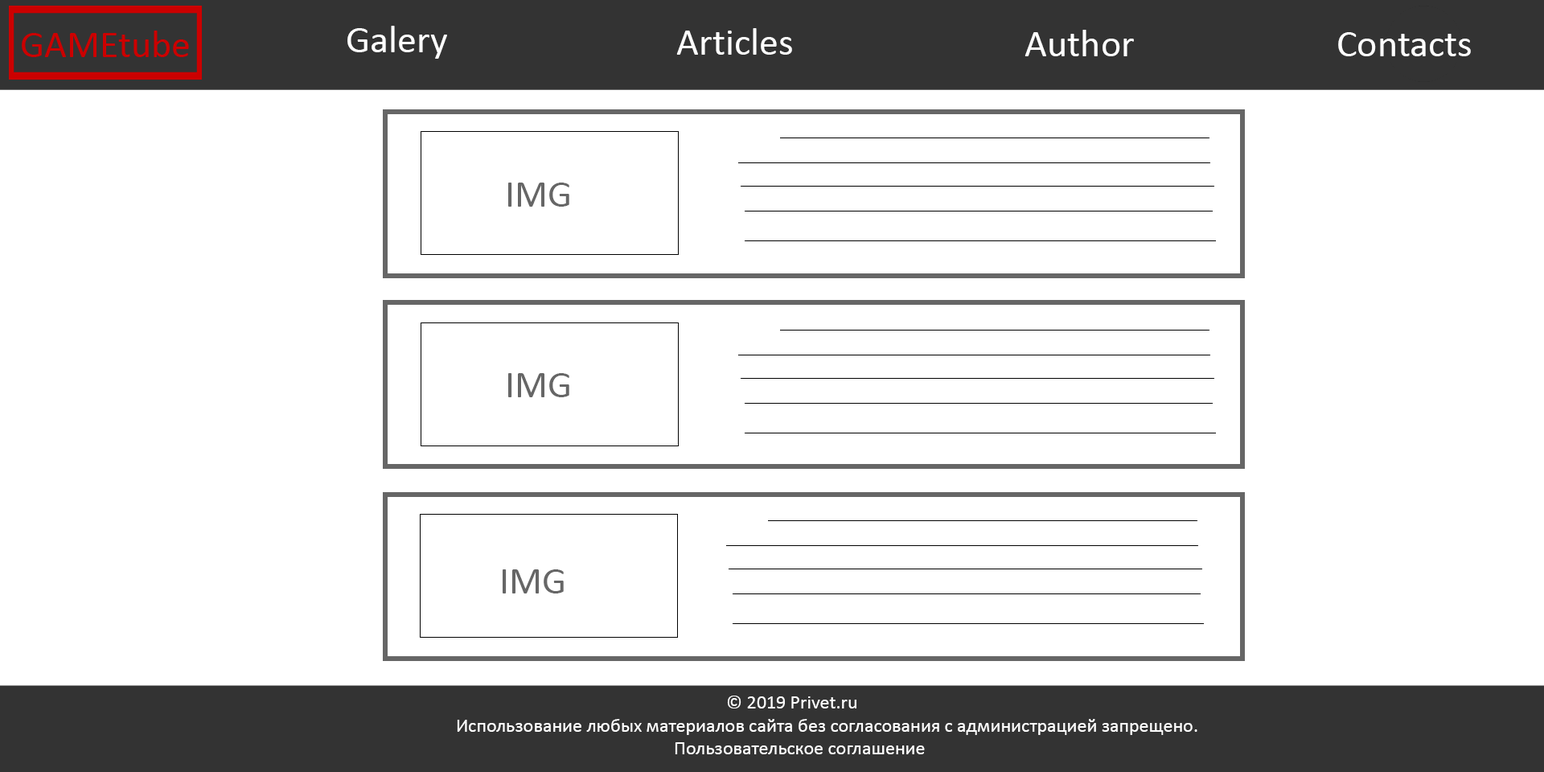
<style>
.page{position:relative;width:1544px;height:772px;background:#ffffff}
.page>*{position:absolute;margin:0}
.t1{font:38.6px "Calibri";color:#666666}
.t2{font:19.3px "Calibri";color:#ffffff}
</style>
<div class="page">
<p class="t1" style="left:508px;top:183px;width:61px;height:24px">IMG</p>
<p class="t1" style="left:508px;top:373px;width:61px;height:24px">IMG</p>
<p class="t1" style="left:503px;top:569px;width:61px;height:25px">IMG</p>
<p class="t2" style="left:457px;top:696px;width:741px;height:58px">© 2019 Privet.ru<br>Использование любых материалов сайта без согласования с администрацией запрещено.<br>                                                  Пользовательское соглашение</p>
</div>
